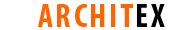
<style>
.page{position:relative;width:195px;height:30px;background:#ffffff}
.page>*{position:absolute;margin:0}
.t1{font:33.3px "MyriadPro-BoldCond";letter-spacing:0.075em;color:#fc6500}
.t2{font:33.3px "MyriadPro-BoldCond";letter-spacing:0.075em;color:#000000}
</style>
<div class="page">
<p class="t1" style="left:38px;top:4px;width:127px;height:23px">ARCHIT<span class="t2">EX</span></p>
</div>
